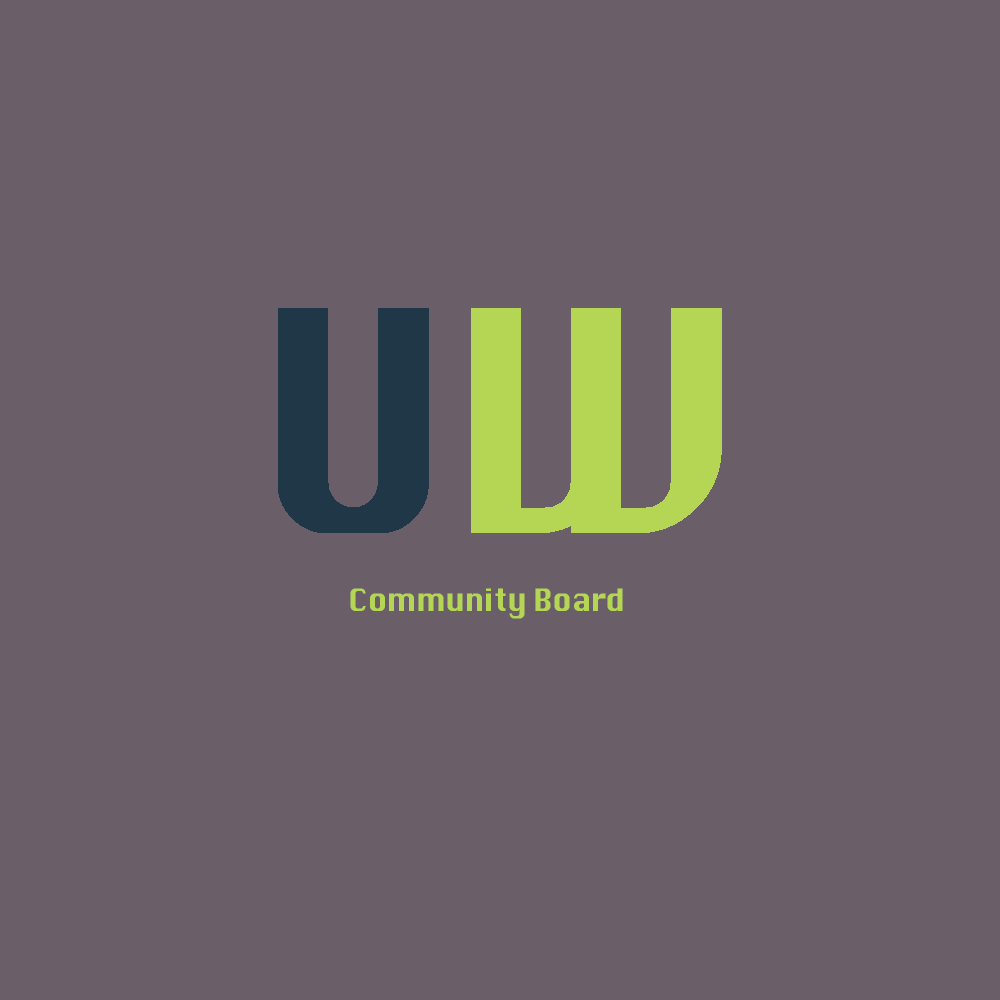
<style>
.page{position:relative;width:1000px;height:1000px;background:#6a5f69}
.page>*{position:absolute;margin:0}
.t1{font:30px "Krungthep";letter-spacing:-0.025em;color:#b5d555}
</style>
<div class="page">
<p class="t1" style="left:350px;top:588px;width:273px;height:31px">Community Board</p>
</div>
